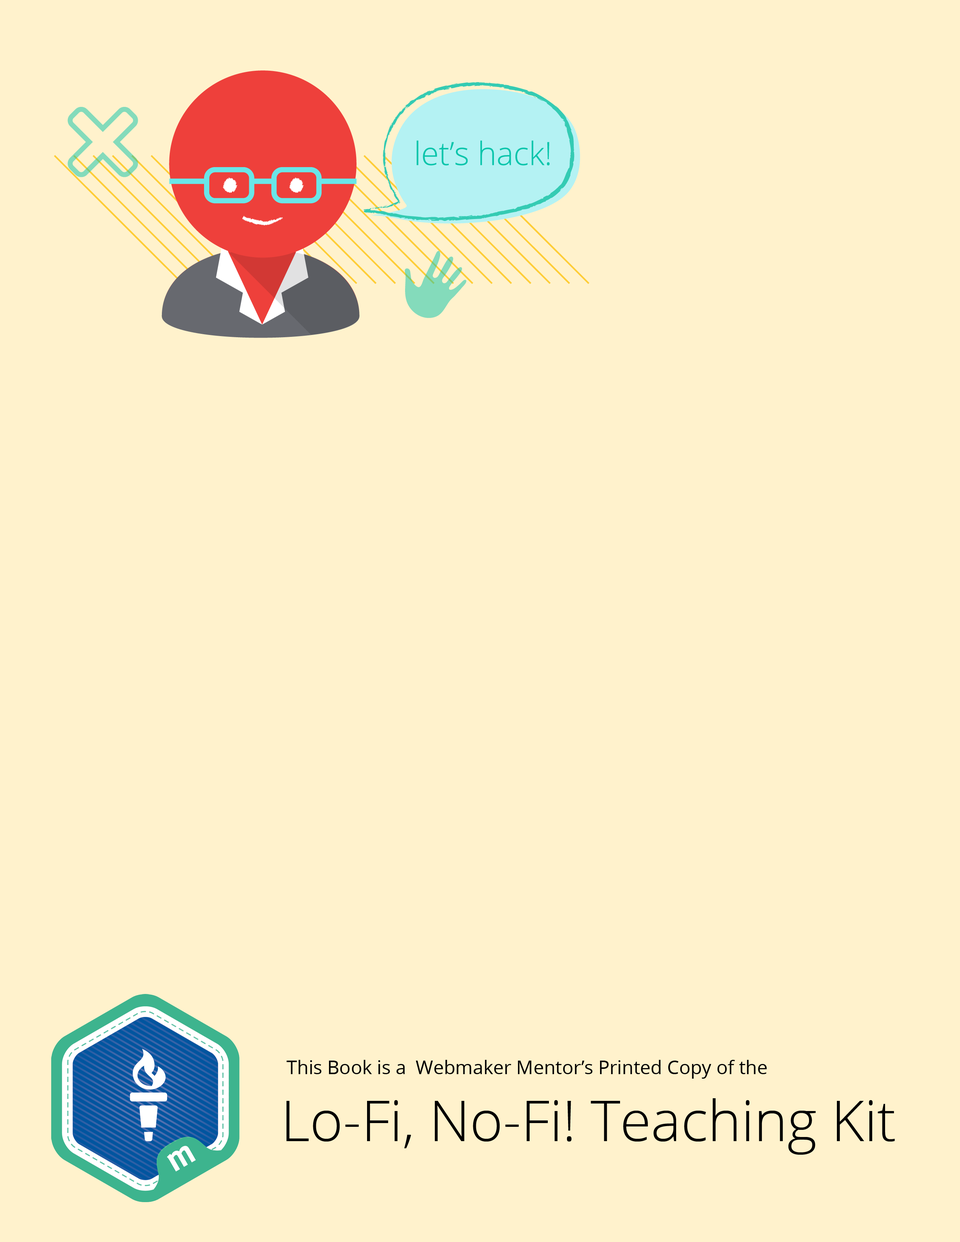
<style>
.page{position:relative;width:960px;height:1242px;background:#fff2cc}
.page>*{position:absolute;margin:0}
.t1{font:18.8px "OpenSans";color:#000000}
.t2{font:56.5px "OpenSans-Light";color:#000000}
</style>
<div class="page">
<p class="t1" style="left:286px;top:1060px;width:481px;height:19px">This Book is a  Webmaker Mentor’s Printed Copy of the</p>
<p class="t2" style="left:286px;top:1098px;width:609px;height:57px">Lo-Fi, No-Fi! Teaching Kit</p>
</div>
